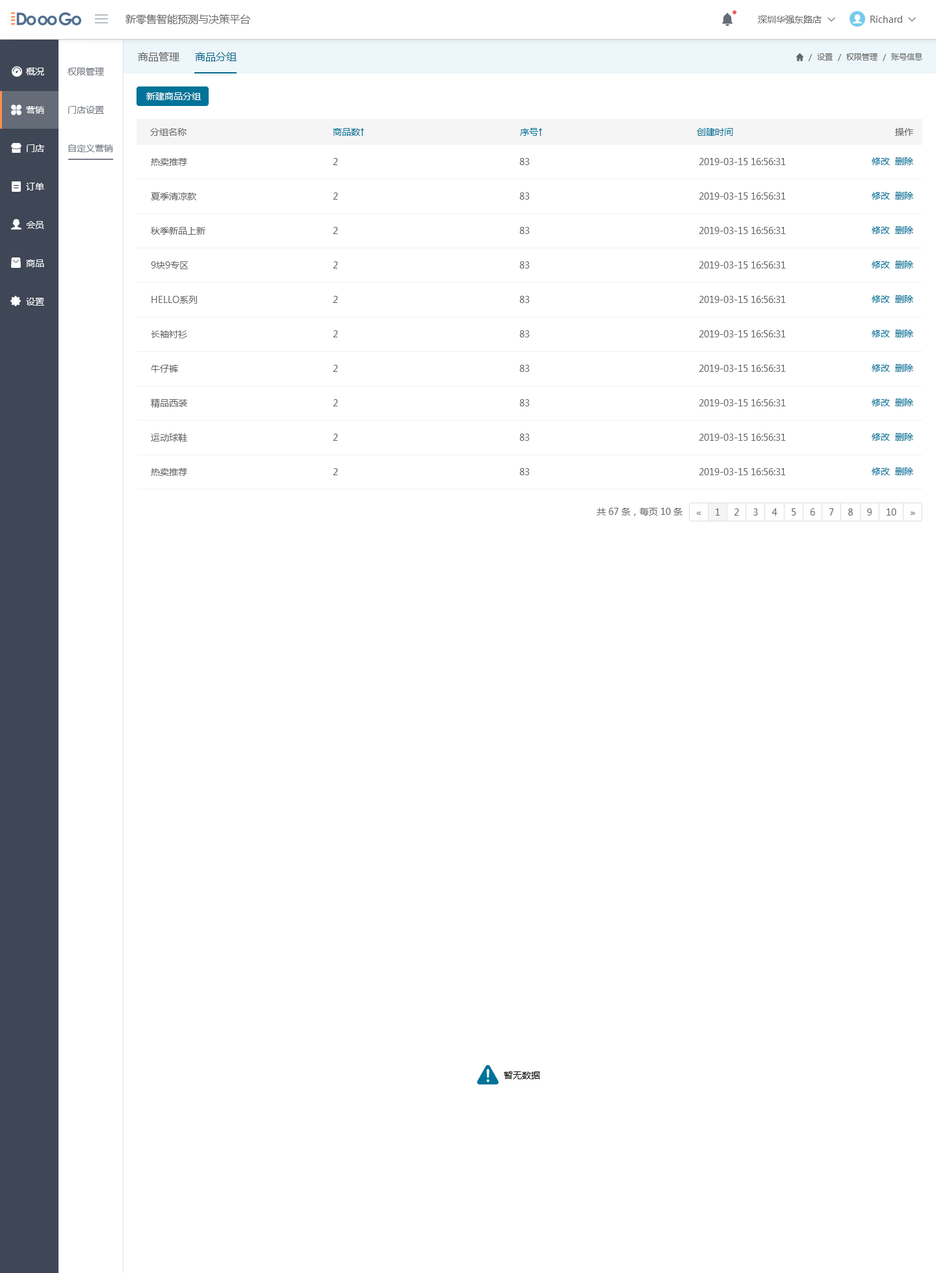
<style>
.page{position:relative;width:936px;height:1273px;background:#ffffff}
.page>*{position:absolute;margin:0}
.t1{font:10.4px "MicrosoftYaHeiUI";color:#666666}
.t2{font:9.1px "MicrosoftYaHeiUI";color:#666666}
.t3{font:9.1px "Marlett";color:#666666}
.t4{font:10.4px "MicrosoftYaHeiUI";color:#086a8b}
.t5{font:7.8px "MicrosoftYaHeiUI";color:#666666}
.t6{font:9.1px/38.4px "MicrosoftYaHeiUI";color:#ffffff}
.t7{font:9.1px/38.4px "MicrosoftYaHeiUI";color:#747982}
.t8{font:9.1px "MicrosoftYaHeiUI";color:#ffffff}
.t9{font:9.1px "MicrosoftYaHeiUI";color:#007398}
.t10{font:9.1px "MicrosoftYaHeiUI";color:#000000}
</style>
<div class="page">
<p class="t1" style="left:126px;top:14px;width:124px;height:10px">新零售智能预测与决策平台</p>
<p class="t2" style="left:758px;top:16px;width:64px;height:7px">深圳华强东路店</p>
<p class="t2" style="left:871px;top:16px;width:42px;height:7px">Richard <span class="t3">6</span></p>
<p class="t1" style="left:138px;top:52px;width:41px;height:10px">商品管理</p>
<p class="t4" style="left:195px;top:52px;width:42px;height:10px">商品分组</p>
<p class="t5" style="left:809px;top:53px;width:114px;height:8px">/  设置  /  权限管理  /  账号信息</p>
<p class="t6" style="left:26px;top:68px;width:18px;height:238px">概况<br>营销<br>门店<br>订单<br>会员<br>商品<br>设置</p>
<p class="t7" style="left:68px;top:68px;width:45px;height:84px">权限管理<br>门店设置<br>自定义营销</p>
<p class="t8" style="left:146px;top:92px;width:55px;height:8px">新建商品分组</p>
<p class="t2" style="left:150px;top:128px;width:37px;height:8px">分组名称</p>
<p class="t9" style="left:333px;top:128px;width:31px;height:8px">商品数↑</p>
<p class="t9" style="left:520px;top:128px;width:22px;height:8px">序号↑</p>
<p class="t9" style="left:697px;top:128px;width:37px;height:8px">创建时间</p>
<p class="t2" style="left:895px;top:128px;width:19px;height:8px">操作</p>
<p class="t2" style="left:151px;top:158px;width:36px;height:8px">热卖推荐</p>
<p class="t2" style="left:333px;top:158px;width:5px;height:7px">2</p>
<p class="t2" style="left:520px;top:158px;width:10px;height:7px">83</p>
<p class="t2" style="left:699px;top:158px;width:87px;height:7px">2019-03-15 16:56:31</p>
<p class="t9" style="left:872px;top:157px;width:42px;height:8px">修改  删除</p>
<p class="t2" style="left:151px;top:192px;width:45px;height:8px">夏季清凉款</p>
<p class="t2" style="left:333px;top:192px;width:5px;height:8px">2</p>
<p class="t2" style="left:520px;top:192px;width:10px;height:8px">83</p>
<p class="t2" style="left:699px;top:192px;width:87px;height:8px">2019-03-15 16:56:31</p>
<p class="t9" style="left:872px;top:192px;width:42px;height:8px">修改  删除</p>
<p class="t2" style="left:151px;top:227px;width:55px;height:8px">秋季新品上新</p>
<p class="t2" style="left:333px;top:227px;width:5px;height:7px">2</p>
<p class="t2" style="left:520px;top:227px;width:10px;height:7px">83</p>
<p class="t2" style="left:699px;top:227px;width:87px;height:7px">2019-03-15 16:56:31</p>
<p class="t9" style="left:872px;top:226px;width:42px;height:8px">修改  删除</p>
<p class="t2" style="left:151px;top:261px;width:38px;height:8px">9块9专区</p>
<p class="t2" style="left:333px;top:261px;width:5px;height:8px">2</p>
<p class="t2" style="left:520px;top:261px;width:10px;height:8px">83</p>
<p class="t2" style="left:699px;top:261px;width:87px;height:8px">2019-03-15 16:56:31</p>
<p class="t9" style="left:872px;top:261px;width:42px;height:8px">修改  删除</p>
<p class="t2" style="left:152px;top:296px;width:45px;height:8px">HELLO系列</p>
<p class="t2" style="left:333px;top:296px;width:5px;height:7px">2</p>
<p class="t2" style="left:520px;top:296px;width:10px;height:7px">83</p>
<p class="t2" style="left:699px;top:296px;width:87px;height:7px">2019-03-15 16:56:31</p>
<p class="t9" style="left:872px;top:295px;width:42px;height:8px">修改  删除</p>
<p class="t9" style="left:872px;top:330px;width:42px;height:8px">修改  删除</p>
<p class="t2" style="left:151px;top:330px;width:36px;height:9px">长袖衬衫</p>
<p class="t2" style="left:333px;top:330px;width:5px;height:8px">2</p>
<p class="t2" style="left:520px;top:330px;width:10px;height:8px">83</p>
<p class="t2" style="left:699px;top:330px;width:87px;height:8px">2019-03-15 16:56:31</p>
<p class="t2" style="left:151px;top:365px;width:27px;height:8px">牛仔裤</p>
<p class="t2" style="left:333px;top:365px;width:5px;height:7px">2</p>
<p class="t2" style="left:520px;top:365px;width:10px;height:7px">83</p>
<p class="t2" style="left:699px;top:365px;width:87px;height:7px">2019-03-15 16:56:31</p>
<p class="t9" style="left:872px;top:364px;width:42px;height:8px">修改  删除</p>
<p class="t2" style="left:151px;top:399px;width:36px;height:9px">精品西装</p>
<p class="t2" style="left:333px;top:399px;width:5px;height:7px">2</p>
<p class="t2" style="left:520px;top:399px;width:10px;height:7px">83</p>
<p class="t2" style="left:699px;top:399px;width:87px;height:7px">2019-03-15 16:56:31</p>
<p class="t9" style="left:872px;top:399px;width:42px;height:7px">修改  删除</p>
<p class="t2" style="left:151px;top:433px;width:36px;height:9px">运动球鞋</p>
<p class="t2" style="left:333px;top:434px;width:5px;height:7px">2</p>
<p class="t2" style="left:520px;top:434px;width:10px;height:7px">83</p>
<p class="t2" style="left:699px;top:434px;width:87px;height:7px">2019-03-15 16:56:31</p>
<p class="t9" style="left:872px;top:433px;width:42px;height:8px">修改  删除</p>
<p class="t2" style="left:151px;top:468px;width:36px;height:8px">热卖推荐</p>
<p class="t2" style="left:333px;top:468px;width:5px;height:7px">2</p>
<p class="t2" style="left:520px;top:468px;width:10px;height:7px">83</p>
<p class="t2" style="left:699px;top:468px;width:87px;height:7px">2019-03-15 16:56:31</p>
<p class="t9" style="left:872px;top:468px;width:42px;height:7px">修改  删除</p>
<p class="t2" style="left:597px;top:508px;width:86px;height:8px">共 67 条，每页 10 条</p>
<p class="t10" style="left:504px;top:1072px;width:36px;height:8px">暂无数据</p>
</div>
